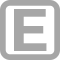
<style>
.page{position:relative;width:60px;height:60px;background:#a6a6a6}
.page>*{position:absolute;margin:0}
.t1{font:60px "Montserrat-Bold";color:#a6a6a6}
</style>
<div class="page">
<p class="t1" style="left:14px;top:9px;width:33px;height:42px">E</p>
</div>
